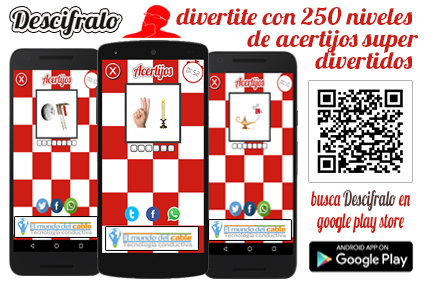
<style>
.page{position:relative;width:425px;height:283px;background:#ffffff}
.page>*{position:absolute;margin:0}
.t1{font:23.6px/22px "Lobster1.4";color:#cd1d15;scale:1.09 1}
.t2{font:21.1px/21.2px "Lobster1.4";color:#cd1d15;scale:0.63 1}
.t3{font:21.1px/21.2px "Lobster1.4";color:#563a39;scale:0.63 1}
</style>
<div class="page">
<p class="t1" style="left:176px;top:7px;width:242px;height:62px;text-align:right">divertite con 250 niveles <br> de acertijos super<br>divertidos</p>
<p class="t2" style="left:310px;top:190px;width:100px;height:44px;text-align:center">busca <span class="t3">Descifralo </span>en<br>google play store</p>
</div>
